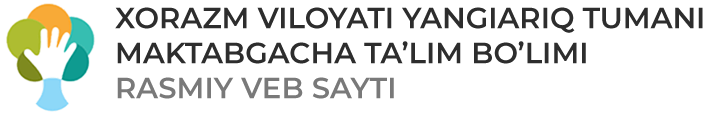
<style>
.page{position:relative;width:719px;height:113px;background:#ffffff}
.page>*{position:absolute;margin:0}
.t1{font:29.2px "Montserrat-SemiBold";color:#2d2d2d;text-transform:uppercase}
.t2{font:29.2px "Montserrat-SemiBold";color:#797979;text-transform:uppercase}
</style>
<div class="page">
<p class="t1" style="left:115px;top:7px;width:588px;height:92px">xorazm viloyati yangiariq tumani<br>maktabgacha ta’lim bo’limi<br><span class="t2">rasmiy veb sayti</span></p>
</div>
